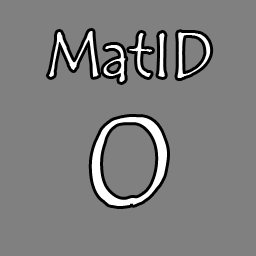
<style>
.page{position:relative;width:256px;height:256px;background:#808080}
.page>*{position:absolute;margin:0}
.t1{font:64px/128px "TempusSansITC";color:#ffffff}
.t2{font:128px/128px "TempusSansITC";color:#ffffff}
</style>
<div class="page">
<p class="t1" style="left:48px;top:31px;width:163px;height:175px;text-align:center">MatID<br><span class="t2">0</span></p>
</div>
